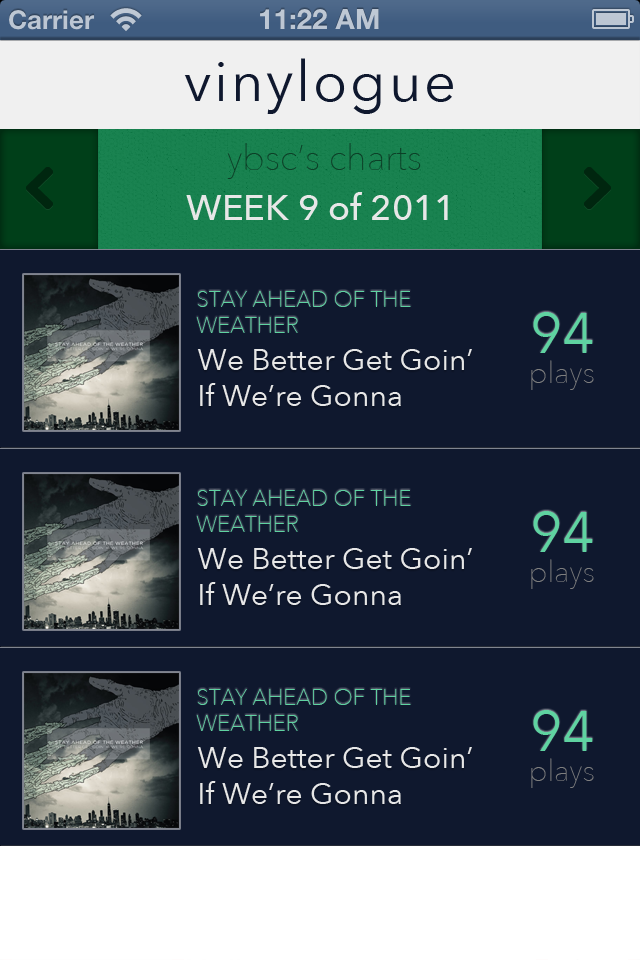
<style>
.page{position:relative;width:640px;height:960px;background:#0f182e}
.page>*{position:absolute;margin:0}
.t1{font:56px "AvenirNext-Regular";letter-spacing:0.05em;color:#0f182e}
.t2{font:36px "AvenirNext-UltraLight";color:#0c4128}
.t3{font:36px "AvenirNext-Medium";color:#e7e7e7}
.t4{font:22px "AvenirNext-UltraLight";color:#5fd3a1}
.t5{font:56px "AvenirNext-Regular";color:#5fd3a1}
.t6{font:30px "AvenirNext-Regular";color:#e7e7e7}
.t7{font:30px "AvenirNext-UltraLight";color:#7e7e7e}
</style>
<div class="page">
<p class="t1" style="left:184px;top:58px;width:269px;height:56px">vinylogue</p>
<p class="t2" style="left:227px;top:143px;width:194px;height:36px">ybsc’s charts</p>
<p class="t3" style="left:186px;top:192px;width:262px;height:28px">WEEK 9 of 2011</p>
<p class="t4" style="left:196px;top:291px;width:215px;height:42px">STAY AHEAD OF THE WEATHER</p>
<p class="t5" style="left:533px;top:312px;width:60px;height:41px">94</p>
<p class="t6" style="left:197px;top:349px;width:275px;height:57px">We Better Get Goin’ If We’re Gonna</p>
<p class="t7" style="left:531px;top:360px;width:63px;height:30px">plays</p>
<p class="t4" style="left:196px;top:490px;width:215px;height:42px">STAY AHEAD OF THE WEATHER</p>
<p class="t5" style="left:533px;top:511px;width:60px;height:41px">94</p>
<p class="t6" style="left:197px;top:548px;width:275px;height:57px">We Better Get Goin’ If We’re Gonna</p>
<p class="t7" style="left:531px;top:559px;width:63px;height:30px">plays</p>
<p class="t4" style="left:196px;top:689px;width:215px;height:42px">STAY AHEAD OF THE WEATHER</p>
<p class="t5" style="left:533px;top:710px;width:60px;height:41px">94</p>
<p class="t6" style="left:197px;top:747px;width:275px;height:57px">We Better Get Goin’ If We’re Gonna</p>
<p class="t7" style="left:531px;top:758px;width:63px;height:30px">plays</p>
</div>
